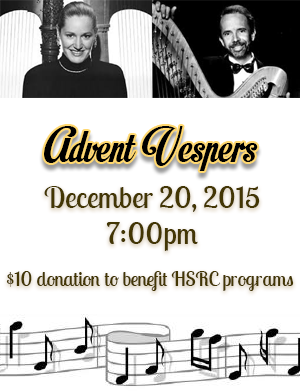
<style>
.page{position:relative;width:300px;height:392px;background:#ffffff}
.page>*{position:absolute;margin:0}
.t1{font:50px "MotionPicturePersonalUse";color:#000000}
.t2{font:20px/30px "LobsterTwo";color:#433604}
.t3{font:30px/20px "LobsterTwo";color:#433604}
.t4{font:20px "LobsterTwo";color:#433604}
</style>
<div class="page">
<p class="t1" style="left:44px;top:126px;width:214px;height:45px">Advent Vespers</p>
<p class="t2" style="left:44px;top:186px;width:216px;height:65px;text-align:center"><span class="t3">December 20, 2015<br>7:00pm<br></span>$10 donation to benefit HSRC programs</p>
<p class="t4" style="left:6px;top:271px;width:288px;height:20px">$10 donation to benefit HSRC programs</p>
</div>
